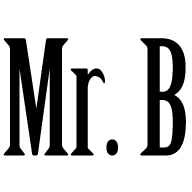
<style>
.page{position:relative;width:192px;height:192px;background:#ffffff}
.page>*{position:absolute;margin:0}
.t1{font:156px "BirchStd";color:#000000}
</style>
<div class="page">
<p class="t1" style="left:3px;top:38px;width:183px;height:118px">Mr. B</p>
</div>
